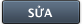
<style>
.page{position:relative;width:82px;height:24px}
.page>*{position:absolute;margin:0}
.t1{font:11.5px "LucidaGrande-Bold";color:#ffffff}
</style>
<div class="page">
<p class="t1" style="left:28px;top:5px;width:25px;height:13px">SỬA</p>
</div>
